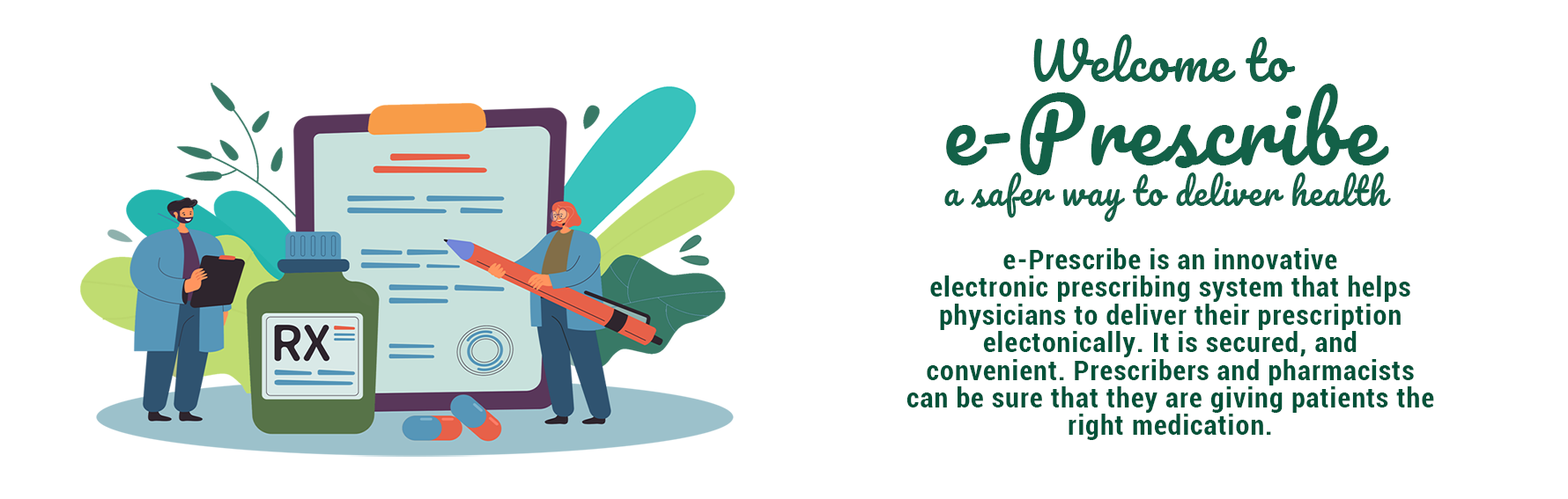
<style>
.page{position:relative;width:1568px;height:499px;background:#ffffff}
.page>*{position:absolute;margin:0}
.t1{font:50.1px "Pacifico-Regular";letter-spacing:0.04em;color:#136148}
.t2{font:85.9px "Pacifico-Regular";letter-spacing:0.04em;color:#136148}
.t3{font:35.4px "Pacifico-Regular";letter-spacing:0.04em;color:#136148}
.t4{font:28.6px/27.7px "Roboto-BoldCondensed";letter-spacing:0.04em;color:#005239}
</style>
<div class="page">
<p class="t1" style="left:1033px;top:34px;width:263px;height:48px">Welcome to</p>
<p class="t2" style="left:946px;top:84px;width:443px;height:91px">e-Prescribe</p>
<p class="t3" style="left:944px;top:173px;width:447px;height:49px">a safer way to deliver health</p>
<p class="t4" style="left:906px;top:248px;width:528px;height:192px;text-align:center">e-Prescribe is an innovative <br>electronic prescribing system that helps physicians to deliver their prescription electonically. It is secured, and <br>convenient. Prescribers and pharmacists can be sure that they are giving patients the right medication.</p>
</div>
